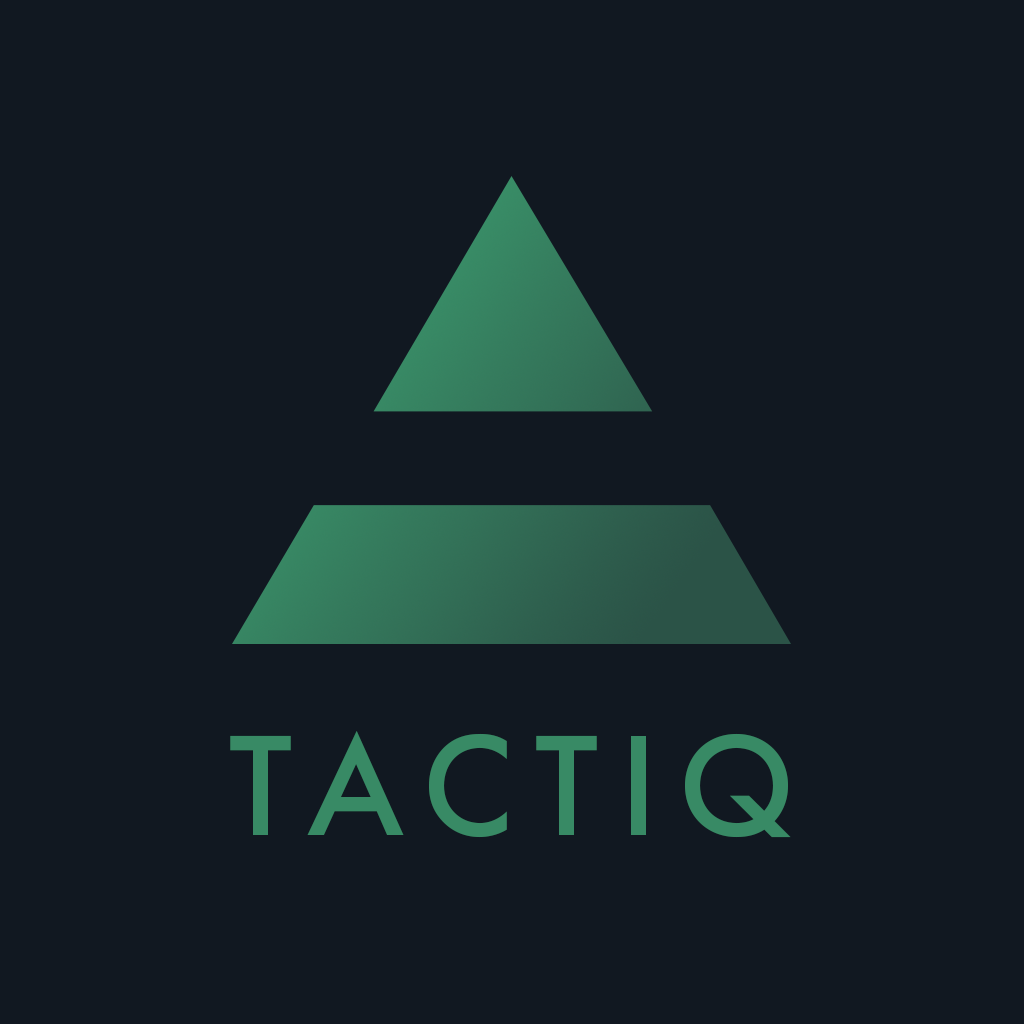
<style>
.page{position:relative;width:1024px;height:1024px;background:#111821}
.page>*{position:absolute;margin:0}
.t1{font:148px "FuturaPT-Medium";letter-spacing:0.14em;color:#388a65}
</style>
<div class="page">
<p class="t1" style="left:230px;top:731px;width:561px;height:107px">TACTIQ</p>
</div>
